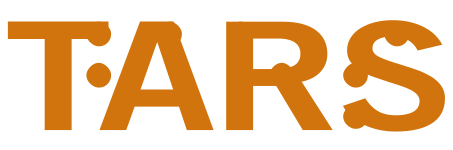
<style>
.page{position:relative;width:453px;height:150px;background:#ffffff}
.page>*{position:absolute;margin:0}
.t1{font:150px "TradeGothicNo.2-Bold";letter-spacing:-0.025em;color:#d1740d;scale:1.3 1}
.t2{font:165px "Braille";letter-spacing:-0.068em;color:#d1740d}
.t3{font:165px "Braille";letter-spacing:-0.055em;color:#d1740d}
</style>
<div class="page">
<p class="t1" style="left:7px;top:20px;width:438px;height:112px">TARS</p>
<p class="t2" style="left:45px;top:21px;width:365px;height:108px">ta<span class="t3">rs</span></p>
</div>
